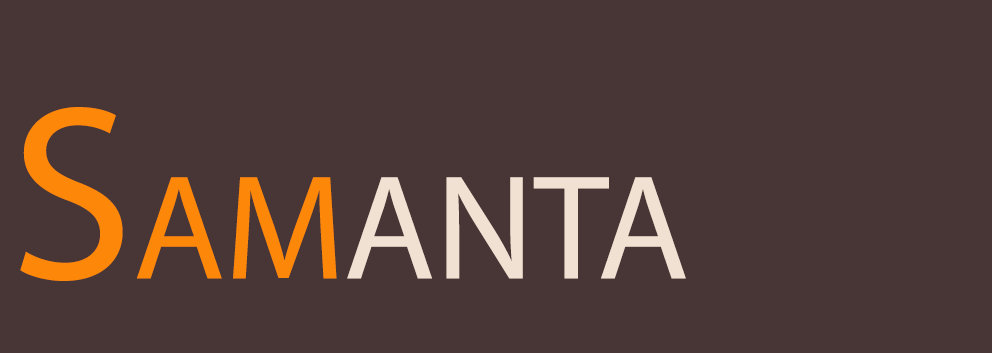
<style>
.page{position:relative;width:992px;height:353px;background:#483535}
.page>*{position:absolute;margin:0}
.t1{font:150px "MyriadPro-Regular";color:#f0e1d2}
.t2{font:250px "MyriadPro-Regular";color:#fc8709}
.t3{font:150px "MyriadPro-Regular";color:#fc8709}
</style>
<div class="page">
<p class="t1" style="left:20px;top:107px;width:666px;height:174px"><span class="t2">S</span><span class="t3">AM</span>ANTA</p>
</div>
